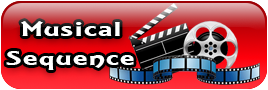
<style>
.page{position:relative;width:268px;height:90px}
.page>*{position:absolute;margin:0}
.t1{font:21.8px "ARESSENCE";letter-spacing:0.04em;color:#ffffff;scale:1.64 1}
</style>
<div class="page">
<p class="t1" style="left:6px;top:21px;width:128px;height:49px;text-align:center">Musical<br>Sequence</p>
</div>
